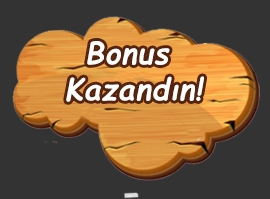
<style>
.page{position:relative;width:270px;height:199px;background:#333333}
.page>*{position:absolute;margin:0}
.t1{font:30px "ComicSansMS-Bold";letter-spacing:0.02em;color:#fdfffd;font-style:italic}
</style>
<div class="page">
<p class="t1" style="left:66px;top:41px;width:138px;height:61px;text-align:center">Bonus <br>Kazandın!</p>
</div>
